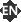
<style>
.page{position:relative;width:21px;height:22px;background:#ffffff}
.page>*{position:absolute;margin:0}
.t1{font:11.6px "MicrosoftYaHei";color:#ffffff;font-weight:bold}
</style>
<div class="page">
<p class="t1" style="left:2px;top:5px;width:16px;height:10px">EN</p>
</div>
